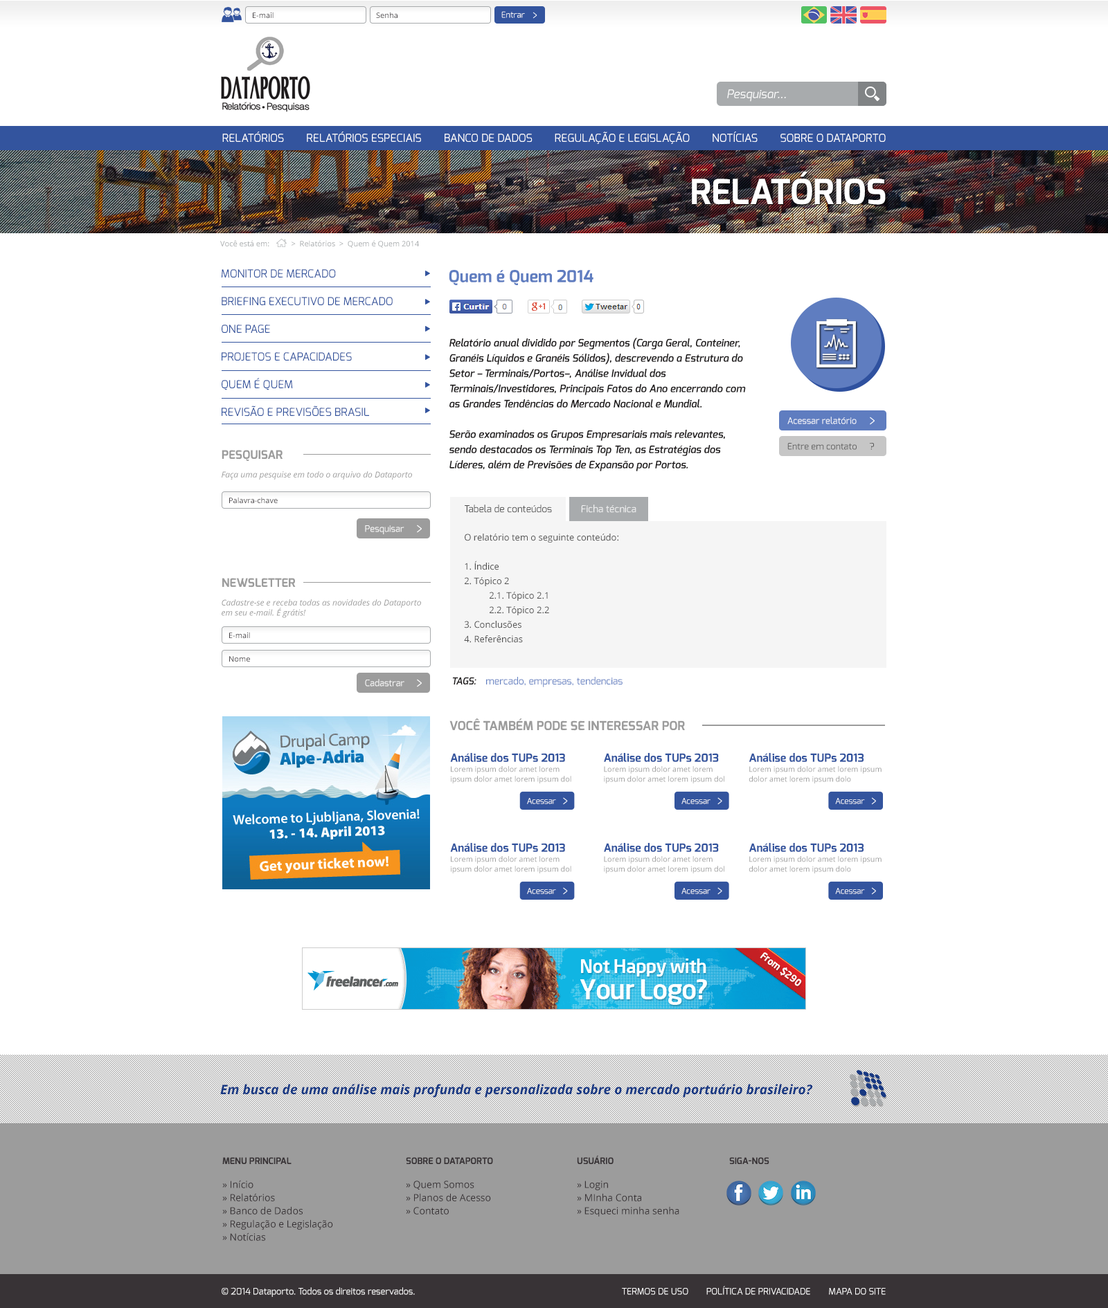
<style>
.page{position:relative;width:1108px;height:1308px;background:#ffffff}
.page>*{position:absolute;margin:0}
.t1{font:7.6px "OpenSans";color:#444043}
.t2{font:8.3px "Exo-Regular";color:#ffffff}
.t3{font:11.8px "Exo-Italic";color:#ffffff}
.t4{font:11.1px "Exo-Regular";color:#ffffff;text-transform:uppercase}
.t5{font:34.6px "Exo-Bold";color:#ffffff;text-transform:uppercase}
.t6{font:7.6px "OpenSans";color:#a8abad}
.t7{font:11.1px/27.7px "Exo-Regular";color:#33549e}
.t8{font:16.6px "Exo-Bold";color:#5f7dc0}
.t9{font:10.4px/15.2px "Exo-DemiBoldItalic";color:#1b1819}
.t10{font:9px "Exo-Regular";color:#ffffff}
.t11{font:9px "Exo-Regular";color:#5e5e5e}
.t12{font:9px "Exo-Regular";color:#555555}
.t13{font:11.8px "Exo-Bold";color:#9c9c9c}
.t14{font:8.3px "OpenSans-Italic";color:#9c9c9c}
.t15{font:9.7px "Exo-Regular";color:#525252}
.t16{font:9.7px "Exo-Regular";color:#f5f5f5}
.t17{font:9px/14.5px "OpenSans";color:#525252}
.t18{font:9.7px "Exo-Regular";color:#5f7dc0}
.t19{font:9.7px "Exo-DemiBoldItalic";color:#1b1819}
.t20{font:12.5px "Exo-Bold";color:#9c9c9c}
.t21{font:7.5px/10px "OpenSans";color:#9c9c9c}
.t22{font:11.2px/15.2px "Exo-Bold";color:#33549e}
.t23{font:8.1px "Exo-Regular";color:#ffffff}
.t24{font:13.2px "OpenSans-BoldItalic";color:#173883}
.t25{font:9.7px/13.2px "OpenSans";color:#383336}
.t26{font:9px "Exo-Bold";color:#383336;text-transform:uppercase}
.t27{font:9px "Exo-Regular";color:#ffffff;text-transform:uppercase}
</style>
<div class="page">
<p class="t1" style="left:253px;top:12px;width:20px;height:6px">E-mail</p>
<p class="t1" style="left:376px;top:12px;width:21px;height:6px">Senha</p>
<p class="t2" style="left:501px;top:11px;width:24px;height:7px">Entrar</p>
<p class="t3" style="left:727px;top:89px;width:59px;height:13px">Pesquisar...</p>
<p class="t4" style="left:222px;top:132px;width:663px;height:12px">Relatórios        Relatórios Especiais        Banco de Dados        Regulação e Legislação        Notícias        Sobre o Dataporto</p>
<p class="t5" style="left:692px;top:172px;width:193px;height:33px">RELATÓRIOS</p>
<p class="t6" style="left:220px;top:240px;width:49px;height:6px">Você está em:</p>
<p class="t6" style="left:291px;top:240px;width:128px;height:8px">&gt;  Relatórios  &gt;  Quem é Quem 2014</p>
<p class="t7" style="left:222px;top:269px;width:171px;height:148px">MONITOR DE MERCADO<br>BRIEFING EXECUTIVO DE MERCADO<br>ONE PAGE<br>PROJETOS E CAPACIDADES<br>QUEM É QUEM<br>REVISÃO E PREVISÕES BRASIL</p>
<p class="t8" style="left:449px;top:270px;width:144px;height:15px">Quem é Quem 2014</p>
<p class="t9" style="left:449px;top:338px;width:297px;height:133px">Relatório anual dividido por Segmentos (Carga Geral, Conteiner, Granéis Líquidos e Granéis Sólidos), descrevendo a Estrutura do Setor – Terminais/Portos–, Análise Invidual dos Terminais/Investidores, Principais Fatos do Ano encerrando com as Grandes Tendências do Mercado Nacional e Mundial.<br><br>Serão examinados os Grupos Empresariais mais relevantes, sendo destacados os Terminais Top Ten, as Estratégias dos Líderes, além de Previsões de Expansão por Portos.</p>
<p class="t10" style="left:787px;top:417px;width:69px;height:7px">Acessar relatório</p>
<p class="t11" style="left:787px;top:443px;width:69px;height:7px">Entre em contato</p>
<p class="t12" style="left:869px;top:442px;width:5px;height:8px">?</p>
<p class="t13" style="left:222px;top:450px;width:60px;height:11px">PESQUISAR</p>
<p class="t14" style="left:222px;top:471px;width:190px;height:9px">Faça uma pesquise em todo o arquivo do Dataporto</p>
<p class="t1" style="left:229px;top:497px;width:49px;height:6px">Palavra-chave</p>
<p class="t15" style="left:465px;top:505px;width:87px;height:8px">Tabela de conteúdos</p>
<p class="t16" style="left:581px;top:505px;width:55px;height:8px">Ficha técnica</p>
<p class="t10" style="left:365px;top:525px;width:39px;height:9px">Pesquisar</p>
<p class="t17" style="left:464px;top:534px;width:154px;height:109px">O relatório tem o seguinte conteúdo:<br><br>1. Índice<br>2. Tópico 2<br> 2.1. Tópico 2.1<br> 2.2. Tópico 2.2<br>3. Conclusões<br>4. Referências</p>
<p class="t13" style="left:222px;top:578px;width:74px;height:10px">NEWSLETTER</p>
<p class="t14" style="left:222px;top:600px;width:199px;height:18px">Cadastre-se e receba todas as novidades do Dataporto<br>em seu e-mail. É grátis!</p>
<p class="t1" style="left:229px;top:632px;width:21px;height:6px">E-mail</p>
<p class="t1" style="left:229px;top:656px;width:21px;height:6px">Nome</p>
<p class="t18" style="left:452px;top:677px;width:170px;height:10px"><span class="t19">TAGS:    </span>mercado, empresas, tendencias</p>
<p class="t10" style="left:365px;top:679px;width:39px;height:8px">Cadastrar</p>
<p class="t20" style="left:449px;top:719px;width:236px;height:12px">VOCÊ TAMBÉM PODE SE INTERESSAR POR</p>
<p class="t21" style="left:450px;top:753px;width:121px;height:31px"><span class="t22">Análise dos TUPs 2013<br></span>Lorem ipsum dolor amet lorem ipsum dolor amet lorem ipsum dol</p>
<p class="t21" style="left:604px;top:753px;width:120px;height:31px"><span class="t22">Análise dos TUPs 2013<br></span>Lorem ipsum dolor amet lorem ipsum dolor amet lorem ipsum dol</p>
<p class="t21" style="left:748px;top:753px;width:133px;height:31px"><span class="t22">Análise dos TUPs 2013<br></span>Lorem ipsum dolor amet lorem ipsum dolor amet lorem ipsum dolo</p>
<p class="t23" style="left:527px;top:798px;width:29px;height:6px">Acessar</p>
<p class="t23" style="left:681px;top:798px;width:29px;height:6px">Acessar</p>
<p class="t23" style="left:835px;top:798px;width:30px;height:6px">Acessar</p>
<p class="t21" style="left:450px;top:843px;width:121px;height:31px"><span class="t22">Análise dos TUPs 2013<br></span>Lorem ipsum dolor amet lorem ipsum dolor amet lorem ipsum dol</p>
<p class="t21" style="left:604px;top:843px;width:120px;height:31px"><span class="t22">Análise dos TUPs 2013<br></span>Lorem ipsum dolor amet lorem ipsum dolor amet lorem ipsum dol</p>
<p class="t21" style="left:748px;top:843px;width:133px;height:31px"><span class="t22">Análise dos TUPs 2013<br></span>Lorem ipsum dolor amet lorem ipsum dolor amet lorem ipsum dolo</p>
<p class="t23" style="left:527px;top:888px;width:29px;height:6px">Acessar</p>
<p class="t23" style="left:681px;top:888px;width:29px;height:6px">Acessar</p>
<p class="t23" style="left:835px;top:888px;width:30px;height:6px">Acessar</p>
<p class="t24" style="left:220px;top:1084px;width:592px;height:14px">Em busca de uma análise mais profunda e personalizada sobre o mercado portuário brasileiro?</p>
<p class="t25" style="left:222px;top:1158px;width:111px;height:83px"><span class="t26">MENU PRINCIPAL<br><br></span>» Início<br>» Relatórios<br>» Banco de Dados<br>» Regulação e Legislação<br>» Notícias</p>
<p class="t25" style="left:406px;top:1158px;width:87px;height:57px"><span class="t26">SOBRE O DATAPORTO<br><br></span>» Quem Somos<br>» Planos de Acesso<br>» Contato</p>
<p class="t25" style="left:577px;top:1155px;width:102px;height:62px"><span class="t26">usuário<br><br></span>» Login<br>» MInha Conta<br>» Esqueci minha senha</p>
<p class="t26" style="left:729px;top:1158px;width:40px;height:6px">SIGA-NOS</p>
<p class="t10" style="left:222px;top:1288px;width:193px;height:9px">© 2014 Dataporto. Todos os direitos reservados.</p>
<p class="t27" style="left:622px;top:1286px;width:263px;height:9px">Termos de Uso        Política de Privacidade        Mapa do Site</p>
</div>
